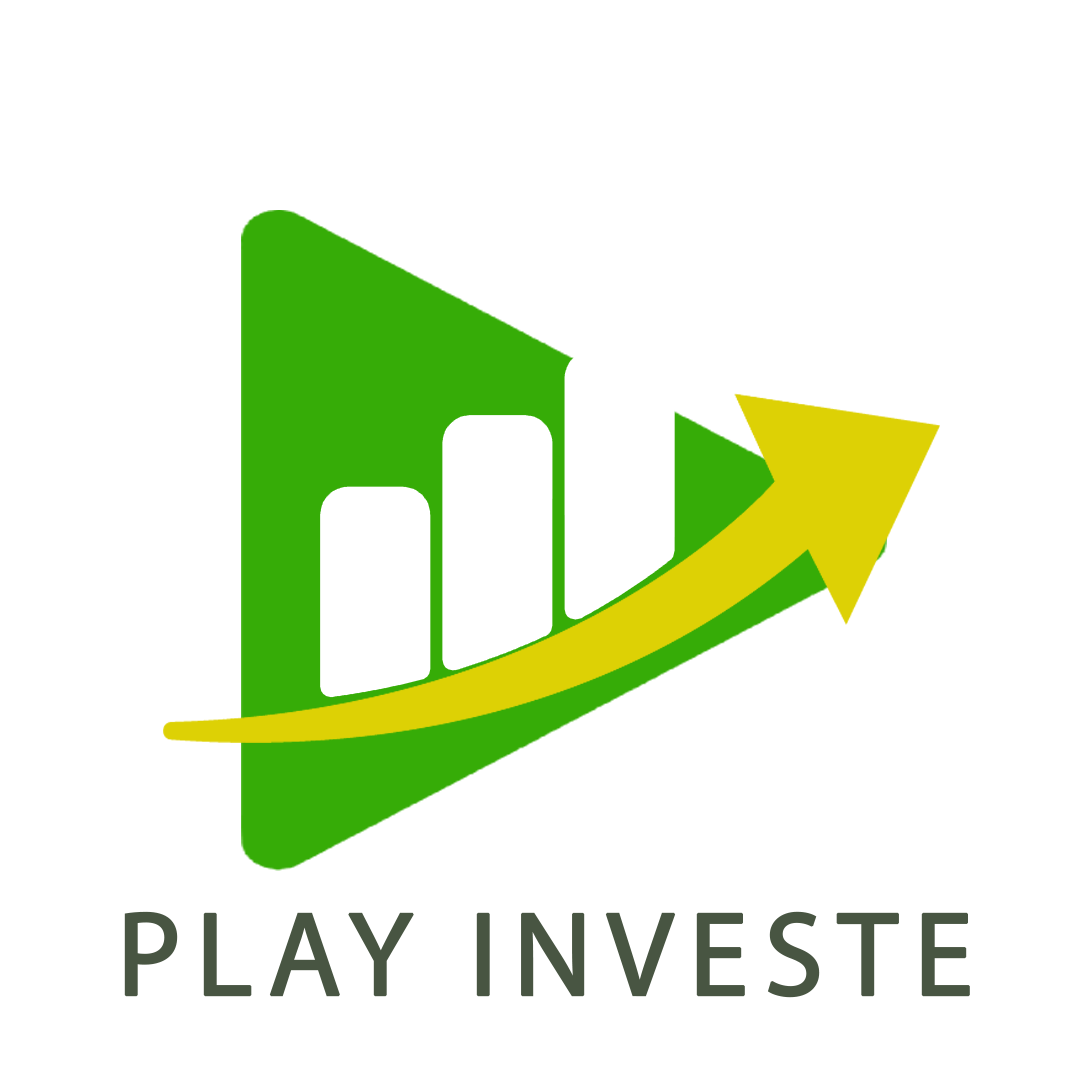
<style>
.page{position:relative;width:1080px;height:1080px;background:#ffffff}
.page>*{position:absolute;margin:0}
.t1{font:120.2px "MyriadPro-Regular";letter-spacing:0.1em;color:#485542;text-transform:uppercase;font-weight:bold}
</style>
<div class="page">
<p class="t1" style="left:124px;top:911px;width:846px;height:87px">play investe</p>
</div>
